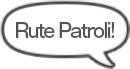
<style>
.page{position:relative;width:130px;height:69px;background:#ffffff}
.page>*{position:absolute;margin:0}
.t1{font:19px "GothicMB101Pro-Medium";letter-spacing:-0.08em;color:#525353;scale:0.9 1}
</style>
<div class="page">
<p class="t1" style="left:16px;top:22px;width:98px;height:16px">Rute Patroli!</p>
</div>
